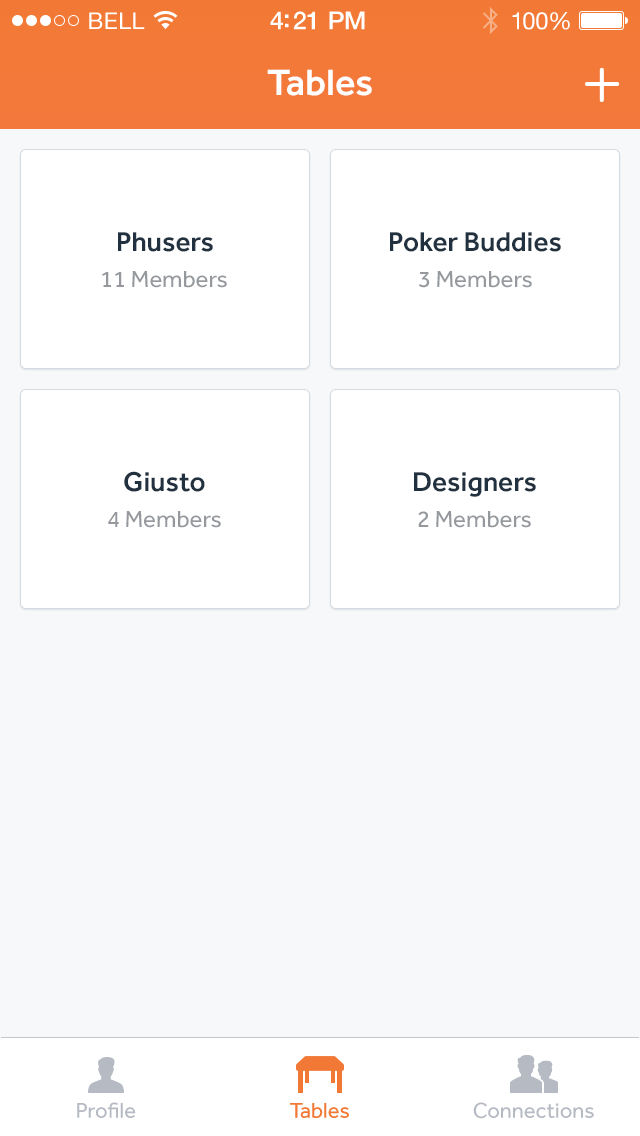
<style>
.page{position:relative;width:640px;height:1136px;background:#f6f8fa}
.page>*{position:absolute;margin:0}
.t1{font:23px "HelveticaNeue";letter-spacing:0.02em;color:#ffffff}
.t2{font:25px "HelveticaNeue-Medium";letter-spacing:-0.02em;color:#ffffff}
.t3{font:24px "HelveticaNeue";letter-spacing:-0.02em;color:#ffffff}
.t4{font:38px "Effra-Medium";color:#ffffff}
.t5{font:28px "Effra-Medium";color:#22313f}
.t6{font:24px "Effra-Regular";color:#95999e}
.t7{font:22px "Effra-Regular";color:#b5bac3}
.t8{font:22px "Effra-Regular";color:#f27935}
</style>
<div class="page">
<p class="t1" style="left:89px;top:12px;width:56px;height:17px">BELL</p>
<p class="t2" style="left:270px;top:11px;width:95px;height:19px">4:21 PM</p>
<p class="t3" style="left:512px;top:12px;width:58px;height:18px">100%</p>
<p class="t4" style="left:267px;top:69px;width:105px;height:27px">Tables</p>
<p class="t5" style="left:118px;top:232px;width:95px;height:20px">Phusers</p>
<p class="t5" style="left:390px;top:232px;width:171px;height:20px">Poker Buddies</p>
<p class="t6" style="left:102px;top:271px;width:125px;height:17px">11 Members</p>
<p class="t6" style="left:419px;top:271px;width:113px;height:17px">3 Members</p>
<p class="t5" style="left:124px;top:471px;width:81px;height:21px">Giusto</p>
<p class="t5" style="left:414px;top:472px;width:122px;height:25px">Designers</p>
<p class="t6" style="left:108px;top:511px;width:113px;height:17px">4 Members</p>
<p class="t6" style="left:418px;top:511px;width:113px;height:17px">2 Members</p>
<p class="t7" style="left:77px;top:1102px;width:59px;height:16px">Profile</p>
<p class="t8" style="left:290px;top:1103px;width:59px;height:15px">Tables</p>
<p class="t7" style="left:473px;top:1102px;width:121px;height:17px">Connections</p>
</div>
